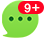
<style>
.page{position:relative;width:44px;height:38px;background:#ffffff}
.page>*{position:absolute;margin:0}
.t1{font:12px "ArialMT";color:#ffffff}
.t2{font:14px "ArialMT";color:#ffffff}
</style>
<div class="page">
<p class="t1" style="left:24px;top:3px;width:7px;height:10px">9</p>
<p class="t2" style="left:32px;top:4px;width:8px;height:7px">+</p>
</div>
